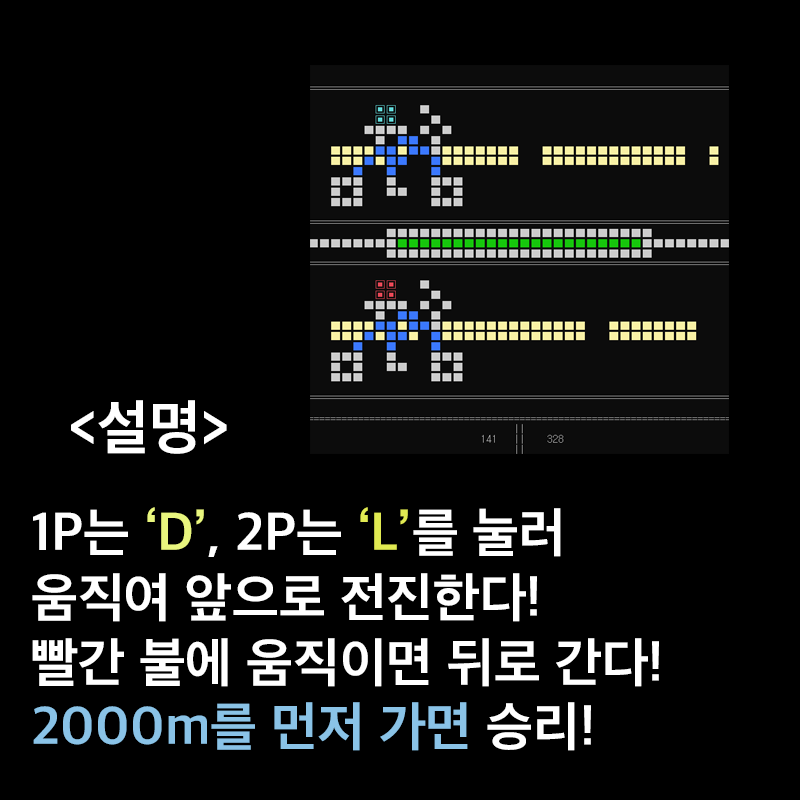
<style>
.page{position:relative;width:800px;height:800px;background:#000000}
.page>*{position:absolute;margin:0}
.t1{font:60px "AppleSDGothicNeoB00";color:#ffffff}
.t2{font:54px "AppleSDGothicNeoB00";color:#ffffff}
.t3{font:54px "AppleSDGothicNeoB00";color:#e9f67e}
.t4{font:54px "AppleSDGothicNeoB00";color:#e1ea52}
.t5{font:54px "AppleSDGothicNeoB00";color:#8ac3e7}
</style>
<div class="page">
<p class="t1" style="left:71px;top:400px;width:156px;height:54px">&lt;설명&gt;</p>
<p class="t2" style="left:32px;top:507px;width:627px;height:244px">1P는 <span class="t3">‘D’</span>, 2P는 <span class="t4">‘L’</span>를 눌러<br>움직여 앞으로 전진한다!<br>빨간 불에 움직이면 뒤로 간다! <br><span class="t5">2000m를 먼저 가면</span> 승리!</p>
</div>
